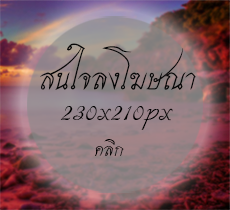
<style>
.page{position:relative;width:230px;height:210px}
.page>*{position:absolute;margin:0}
.t1{font:41px "THSrisakdi";color:#080808}
.t2{font:30.5px "THSrisakdi";color:#000000}
.t3{font:24.3px "THSrisakdi";color:#000000}
</style>
<div class="page">
<p class="t1" style="left:40px;top:43px;width:156px;height:47px">สนใจลงโฆษณา</p>
<p class="t2" style="left:60px;top:106px;width:113px;height:24px">230x210px</p>
<p class="t3" style="left:95px;top:139px;width:29px;height:17px">คลิก</p>
</div>
